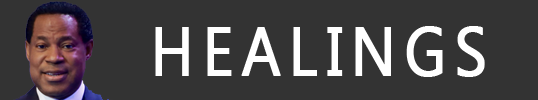
<style>
.page{position:relative;width:538px;height:100px;background:#333333}
.page>*{position:absolute;margin:0}
.t1{font:68.6px "LaoUI";letter-spacing:0.12em;color:#ffffff;text-transform:uppercase;font-weight:bold;scale:0.88 1}
</style>
<div class="page">
<p class="t1" style="left:155px;top:26px;width:330px;height:51px">HEALINGS</p>
</div>
